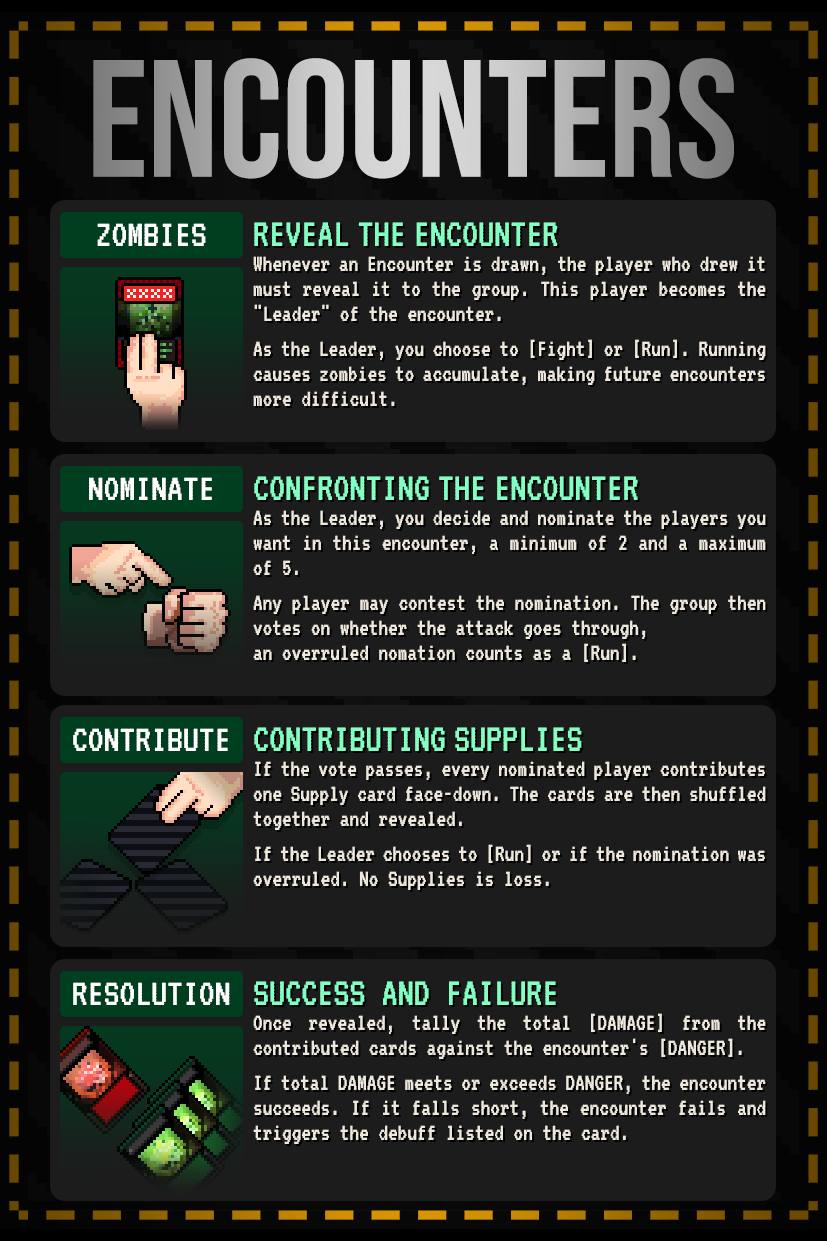
<style>
.page{position:relative;width:827px;height:1241px;background:#1c1c1c}
.page>*{position:absolute;margin:0}
.t1{font:166.7px "BebasNeue-Regular"}
.t2{font:25px/25px "VT323-Regular";color:#eee8dc;scale:0.96 1}
.t3{font:41.7px "VT323-Regular";color:#84ffc3;scale:0.96 1}
.t4{font:39.7px "VT323-Regular";color:#ffffff}
</style>
<div class="page">
<p class="t1" style="left:93px;top:58px;width:641px;height:121px">ENCOUNTERS</p>
<p class="t2" style="left:253px;top:222px;width:513px;height:184px;text-align:justify"><span class="t3">REVEAL THE ENCOUNTER<br></span>Whenever an Encounter is drawn, the player who drew it must reveal it to the group. This player becomes the "Leader" of the encounter.<br><br>As the Leader, you choose to [Fight] or [Run]. Running causes zombies to accumulate, making future encounters more difficult.</p>
<p class="t4" style="left:97px;top:223px;width:109px;height:23px">ZOMBIES</p>
<p class="t4" style="left:89px;top:477px;width:123px;height:23px">NOMINATE</p>
<p class="t2" style="left:253px;top:476px;width:513px;height:186px;text-align:justify"><span class="t3">CONFRONTING THE ENCOUNTER<br></span>As the Leader, you decide and nominate the players you want in this encounter, a minimum of 2 and a maximum of 5.<br><br>Any player may contest the nomination. The group then votes on whether the attack goes through, <br>an overruled nomation counts as a [Run].</p>
<p class="t4" style="left:73px;top:728px;width:155px;height:23px">CONTRIBUTE</p>
<p class="t2" style="left:253px;top:727px;width:513px;height:163px;text-align:justify"><span class="t3">CONTRIBUTING SUPPLIES<br></span>If the vote passes, every nominated player contributes one Supply card face-down. The cards are then shuffled together and revealed.<br><br>If the Leader chooses to [Run] or if the nomination was overruled. No Supplies is loss.</p>
<p class="t4" style="left:73px;top:982px;width:157px;height:23px">RESOLUTION</p>
<p class="t2" style="left:253px;top:981px;width:513px;height:163px;text-align:justify"><span class="t3">SUCCESS AND FAILURE<br></span>Once revealed, tally the total [DAMAGE] from the contributed cards against the encounter's [DANGER].<br><br>If total DAMAGE meets or exceeds DANGER, the encounter succeeds. If it falls short, the encounter fails and triggers the debuff listed on the card.</p>
</div>
